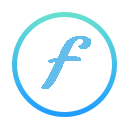
<style>
.page{position:relative;width:128px;height:128px;background:#ffffff}
.page>*{position:absolute;margin:0}
.t1{font:13.1px "Courgette-Regular";color:#65bdeb;scale:1.65 1}
</style>
<div class="page">
<p class="t1" style="left:41px;top:36px;width:50px;height:53px">f</p>
</div>
